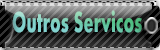
<style>
.page{position:relative;width:160px;height:50px}
.page>*{position:absolute;margin:0}
.t1{font:30px "Aharoni-Bold";scale:0.59 1}
</style>
<div class="page">
<p class="t1" style="left:12px;top:10px;width:130px;height:23px">Outros Servicos</p>
</div>
